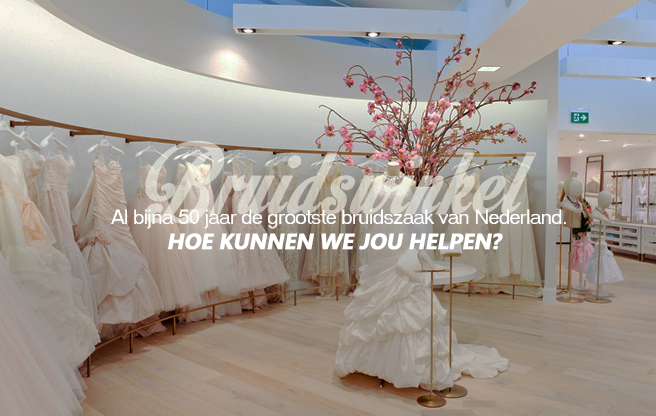
<style>
.page{position:relative;width:656px;height:416px}
.page>*{position:absolute;margin:0}
.t1{font:20px "MS Sans Serif";letter-spacing:-0.025em;color:#ffffff}
.t2{font:22px "MicrosoftTaiLe-Bold";letter-spacing:-0.025em;color:#ffffff;text-transform:uppercase;font-weight:bold;font-style:italic}
</style>
<div class="page">
<p class="t1" style="left:111px;top:209px;width:455px;height:20px">Al bijna 50 jaar de grootste bruidszaak van Nederland.</p>
<p class="t2" style="left:168px;top:233px;width:335px;height:17px">Hoe kunnen we jou helpen?</p>
</div>
